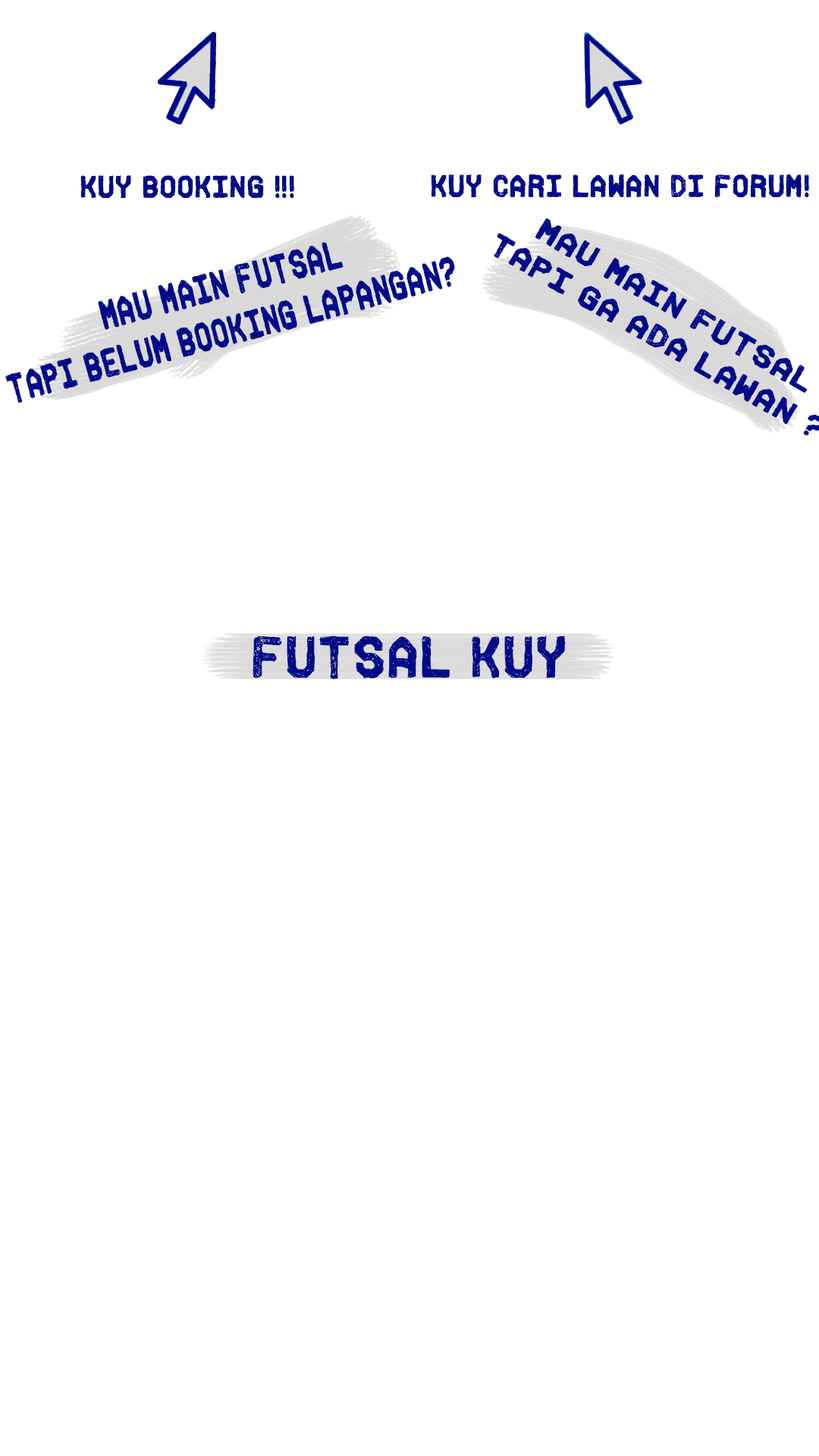
<style>
.page{position:relative;width:819px;height:1456px;background:#ffffff}
.page>*{position:absolute;margin:0}
.t1{font:29.7px "Fh_Ink";color:#000a89}
.t2{font:29.9px "Fh_Ink";color:#000a89}
.t3{font:38.8px "Fh_Ink";color:#000a89;scale:0.76 1}
.t4{font:55.4px "Fh_Ink";color:#000a89}
</style>
<div class="page">
<p class="t1" style="left:80px;top:175px;width:214px;height:23px">KUY BOOKING !!!</p>
<p class="t2" style="left:431px;top:174px;width:378px;height:24px">KUY CARI LAWAN DI FORUM!</p>
<p class="t3" style="left:5px;top:242px;width:450px;height:161px;text-align:center;rotate:-15deg">MAU MAIN FUTSAL<br>TAPI BELUM BOOKING LAPANGAN?</p>
<p class="t4" style="left:253px;top:635px;width:313px;height:44px">FUTSAL KUY</p>
</div>
